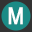
<style>
.page{position:relative;width:32px;height:32px;background:#1c8b86}
.page>*{position:absolute;margin:0}
.t1{font:23.2px "ArialNarrow";letter-spacing:-0.01em;color:#ffffff;font-weight:bold}
</style>
<div class="page">
<p class="t1" style="left:8px;top:7px;width:15px;height:18px">M</p>
</div>
